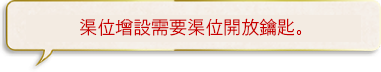
<style>
.page{position:relative;width:381px;height:72px;background:#f3ebe2}
.page>*{position:absolute;margin:0}
.t1{font:18px "GothicMB101Pr6N-Light";color:#c90000}
</style>
<div class="page">
<p class="t1" style="left:80px;top:18px;width:222px;height:18px">渠位增設需要渠位開放鑰匙。</p>
</div>
